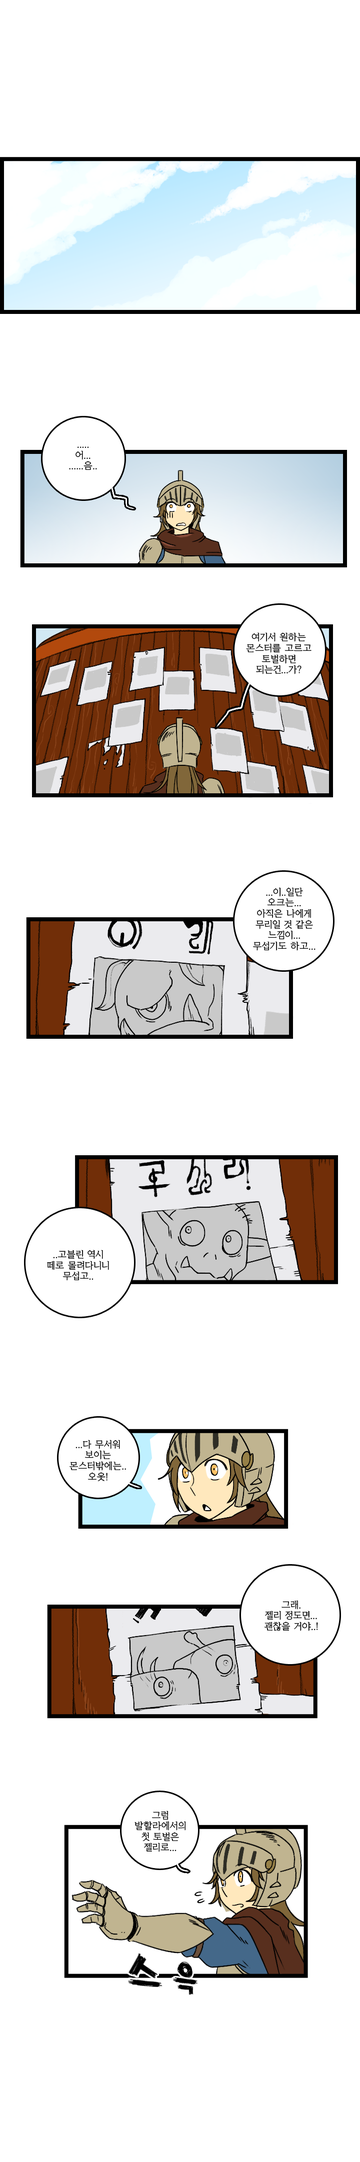
<style>
.page{position:relative;width:360px;height:2162px;background:#ffffff}
.page>*{position:absolute;margin:0}
.t1{font:9px "KoreanYMJ-B";color:#000000}
</style>
<div class="page">
<p class="t1" style="left:69px;top:446px;width:28px;height:24px;text-align:center">.....<br>어...<br>......음..</p>
<p class="t1" style="left:246px;top:632px;width:65px;height:42px;text-align:center">여기서 원하는<br>몬스터를 고르고<br>토벌하면<br>되는건...가?</p>
<p class="t1" style="left:253px;top:887px;width:62px;height:64px;text-align:center">...이..일단<br>오크는...<br>아직은 나에게<br>무리일 것 같은<br>느낌이...<br>무섭기도 하고...</p>
<p class="t1" style="left:47px;top:1250px;width:62px;height:31px;text-align:center">..고블린 역시<br>떼로 몰려다니니<br>무섭고..</p>
<p class="t1" style="left:69px;top:1440px;width:57px;height:41px;text-align:center">...다 무서워<br>보이는<br>몬스터밖에는..<br>오옷!</p>
<p class="t1" style="left:264px;top:1600px;width:54px;height:31px;text-align:center">그래.<br>젤리 정도면...<br>괜찮을 거야..!</p>
<p class="t1" style="left:134px;top:1811px;width:52px;height:41px;text-align:center">그럼<br>발할라에서의<br>첫 토벌은<br>젤리로...</p>
</div>
